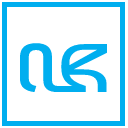
<style>
.page{position:relative;width:128px;height:128px;background:#ffffff}
.page>*{position:absolute;margin:0}
.t1{font:89.6px "NotoSansJavanese-Regular";color:#00aeef;scale:1.12 1}
</style>
<div class="page">
<p class="t1" style="left:19px;top:43px;width:88px;height:50px">ꦗ</p>
</div>
